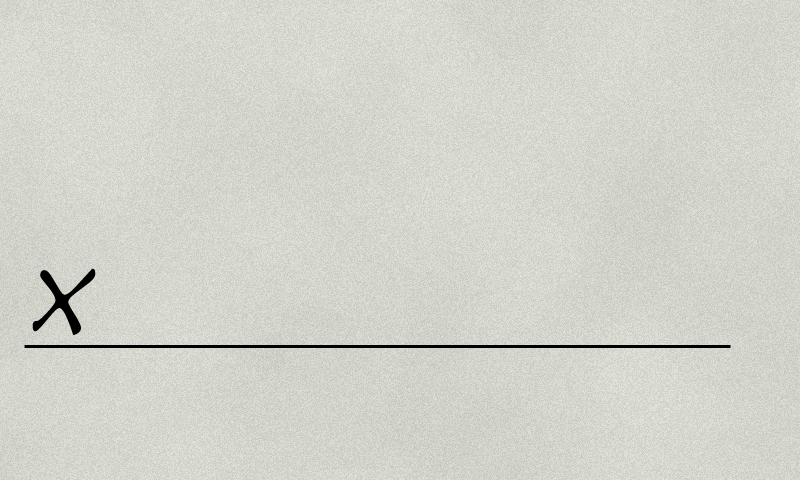
<style>
.page{position:relative;width:800px;height:480px}
.page>*{position:absolute;margin:0}
.t1{font:105px "Handwriting-Dakota";color:#000000}
</style>
<div class="page">
<p class="t1" style="left:32px;top:268px;width:64px;height:67px">X</p>
</div>
